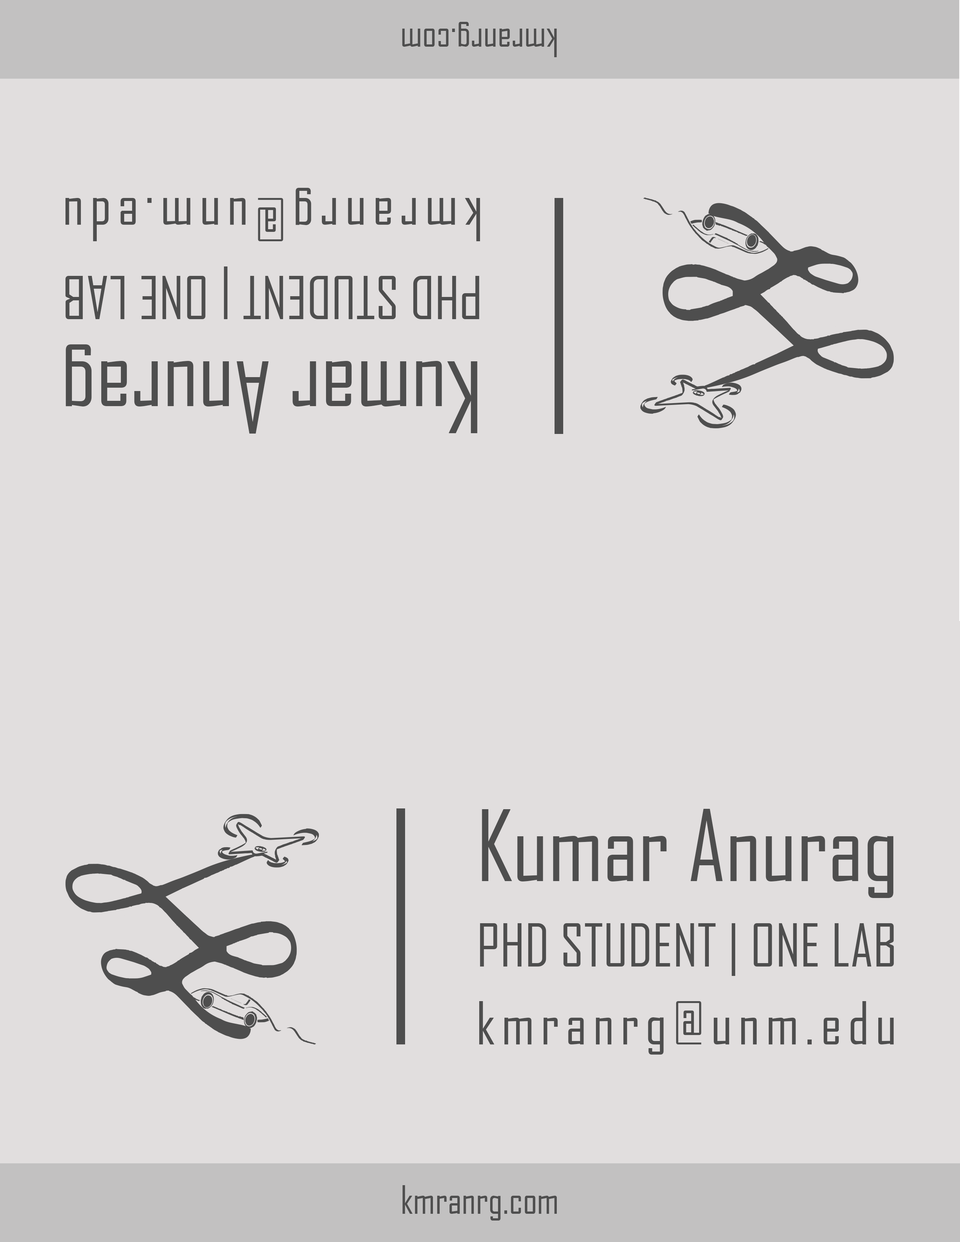
<style>
.page{position:relative;width:960px;height:1242px;background:#e1dede}
.page>*{position:absolute;margin:0}
.t1{font:37.6px "AgencyFB-Reg";color:#4e4e4e}
.t2{font:56.5px "AgencyFB-Reg";letter-spacing:0.11em;color:#4e4e4e}
.t3{font:56.5px "AgencyFB-Reg";color:#4e4e4e}
.t4{font:94.1px "AgencyFB-Reg";color:#4e4e4e}
</style>
<div class="page">
<p class="t1" style="left:402px;top:22px;width:155px;height:35px;rotate:180deg">kmranrg.com</p>
<p class="t2" style="left:65px;top:188px;width:415px;height:53px;rotate:180deg">kmranrg@unm.edu</p>
<p class="t3" style="left:65px;top:267px;width:414px;height:52px;rotate:180deg">PHD STUDENT | ONE LAB</p>
<p class="t4" style="left:65px;top:344px;width:412px;height:90px;rotate:180deg">Kumar Anurag</p>
<p class="t4" style="left:482px;top:809px;width:411px;height:89px">Kumar Anurag</p>
<p class="t3" style="left:480px;top:923px;width:414px;height:53px">PHD STUDENT | ONE LAB</p>
<p class="t2" style="left:479px;top:1001px;width:415px;height:54px">kmranrg@unm.edu</p>
<p class="t1" style="left:402px;top:1185px;width:155px;height:36px">kmranrg.com</p>
</div>
